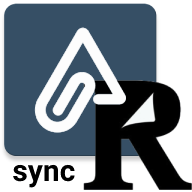
<style>
.page{position:relative;width:192px;height:192px;background:#364f65}
.page>*{position:absolute;margin:0}
.t1{font:30px "Roboto-Bold";color:#000000}
</style>
<div class="page">
<p class="t1" style="left:13px;top:164px;width:62px;height:24px">sync</p>
</div>
